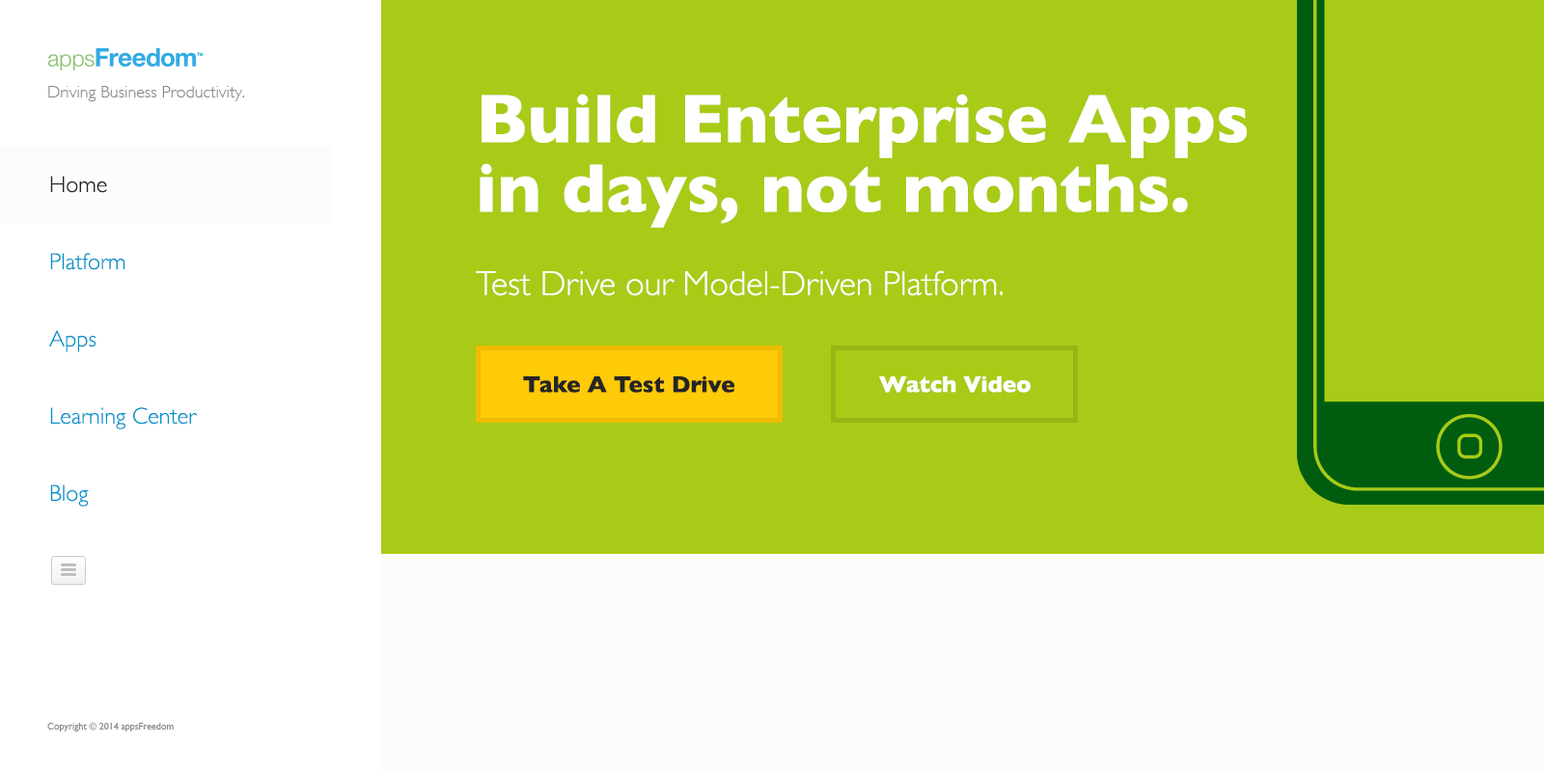
<style>
.page{position:relative;width:1544px;height:772px;background:#a8cb17}
.page>*{position:absolute;margin:0}
.t1{font:17.4px "GillSans-Light";color:#898989}
.t2{font:34.7px "GillSans-Light";color:#ffffff}
.t3{font:69.5px "GillSans-Bold";color:#ffffff}
.t4{font:69.5px/69.5px "GillSans-Bold";color:#ffffff}
.t5{font:23.2px/77.2px "GillSans-Light";color:#0093cc}
.t6{font:23.2px/77.2px "GillSans-Light";color:#252525}
.t7{font:23.2px "GillSans-Bold";color:#252525}
.t8{font:23.2px "GillSans-Bold";color:#ffffff}
.t9{font:9.7px "GillSans";color:#898989}
</style>
<div class="page">
<p class="t1" style="left:48px;top:86px;width:196px;height:15px">Driving Business Productivity.</p>
<p class="t2" style="left:476px;top:94px;width:771px;height:202px"><span class="t3">Build Enterprise Apps <br></span><span class="t4">in days, not months.<br><br></span>Test Drive our Model-Driven Platform.</p>
<p class="t5" style="left:49px;top:176px;width:149px;height:331px"><span class="t6">Home<br></span>Platform<br>Apps<br>Learning Center<br>Blog</p>
<p class="t7" style="left:523px;top:375px;width:212px;height:18px">Take A Test Drive</p>
<p class="t8" style="left:879px;top:375px;width:152px;height:18px">Watch Video</p>
<p class="t9" style="left:47px;top:722px;width:127px;height:10px">Copyright © 2014 appsFreedom</p>
</div>
